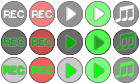
<style>
.page{position:relative;width:140px;height:84px;background:#ffffff}
.page>*{position:absolute;margin:0}
.t1{font:10px "Small Fonts";color:#ffffff}
.t2{font:10px "Small Fonts";color:#1ba51b}
.t3{font:10px "Small Fonts";color:#00ff00}
</style>
<div class="page">
<p class="t1" style="left:3px;top:10px;width:22px;height:8px">REC</p>
<p class="t1" style="left:31px;top:10px;width:22px;height:8px">REC</p>
<p class="t2" style="left:3px;top:38px;width:22px;height:8px">REC</p>
<p class="t2" style="left:31px;top:38px;width:22px;height:8px">REC</p>
<p class="t3" style="left:3px;top:66px;width:22px;height:8px">REC</p>
<p class="t3" style="left:31px;top:66px;width:22px;height:8px">REC</p>
</div>
